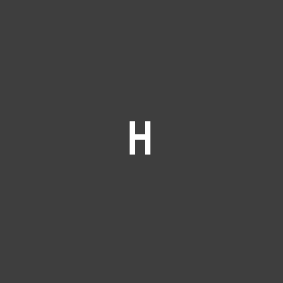
<style>
.page{position:relative;width:283px;height:283px;background:#3e3e3e}
.page>*{position:absolute;margin:0}
.t1{font:46.2px "Arial-BoldMT";color:#ffffff;scale:0.78 1}
</style>
<div class="page">
<p class="t1" style="left:129px;top:121px;width:22px;height:34px">H</p>
</div>
